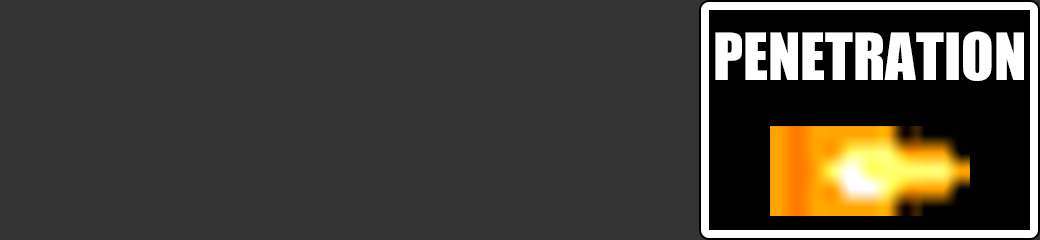
<style>
.page{position:relative;width:1040px;height:240px;background:#333333}
.page>*{position:absolute;margin:0}
.t1{font:60px "Impact";color:#ffffff;text-transform:uppercase}
</style>
<div class="page">
<p class="t1" style="left:715px;top:31px;width:309px;height:50px">penetration</p>
</div>
